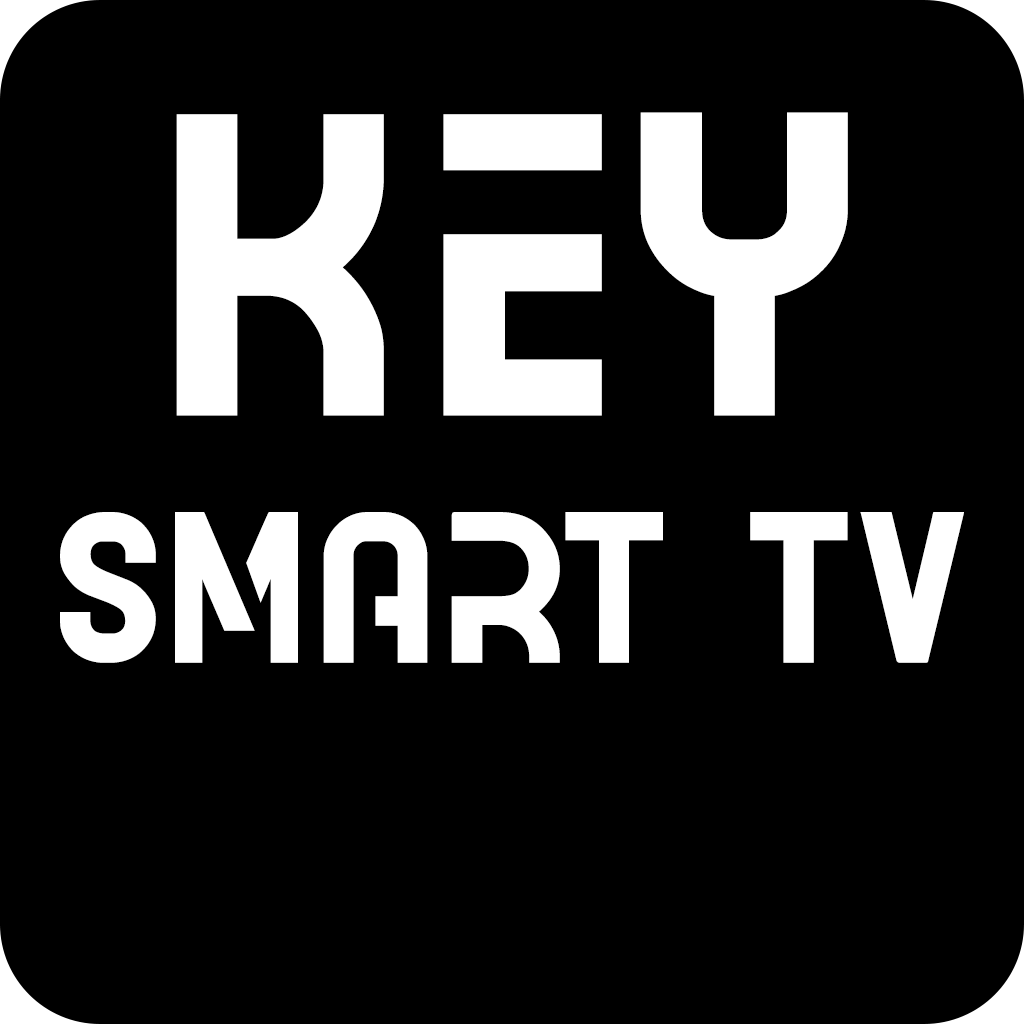
<style>
.page{position:relative;width:1024px;height:1024px;background:#000000}
.page>*{position:absolute;margin:0}
.t1{font:512px "ACETONE";color:#ffffff}
.t2{font:256px "ACETONE";color:#ffffff}
</style>
<div class="page">
<p class="t1" style="left:176px;top:112px;width:672px;height:304px">KEY</p>
<p class="t2" style="left:60px;top:512px;width:904px;height:151px">SMART TV</p>
</div>
